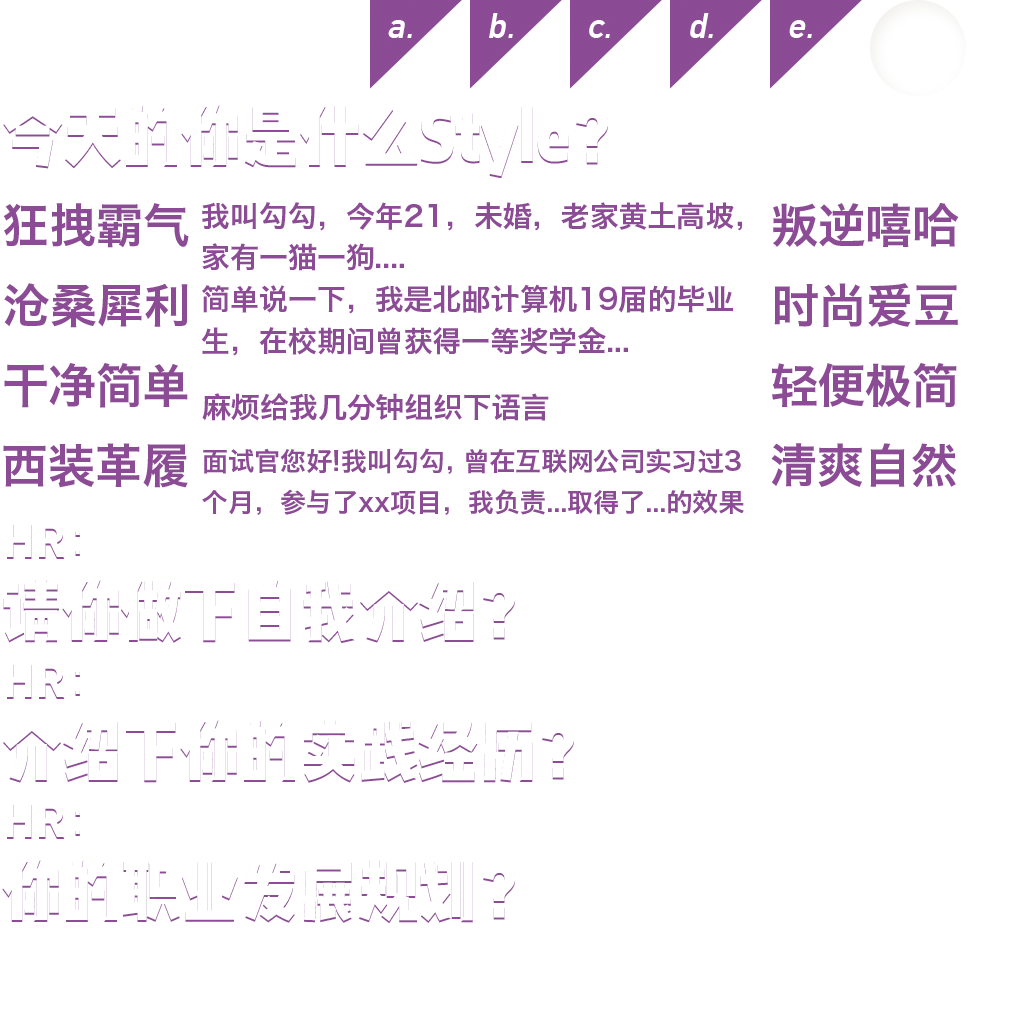
<style>
.page{position:relative;width:1024px;height:1024px;background:#ffffff}
.page>*{position:absolute;margin:0}
.t1{font:35.3px "DINAlternate-Bold";color:#ffffff;font-style:italic}
.t2{font:46.9px "HiraginoSansGB-W6";color:#8c4b95}
.t3{font:28.9px/41.6px "HiraginoSansGB-W6";color:#8c4b95}
.t4{font:28.9px "HiraginoSansGB-W6";color:#8c4b95}
.t5{font:26px/41.6px "HiraginoSansGB-W6";color:#8c4b95}
</style>
<div class="page">
<p class="t1" style="left:489px;top:13px;width:24px;height:25px">b.</p>
<p class="t1" style="left:690px;top:13px;width:23px;height:25px">d.</p>
<p class="t1" style="left:388px;top:20px;width:24px;height:18px">a.</p>
<p class="t1" style="left:589px;top:20px;width:21px;height:18px">c.</p>
<p class="t1" style="left:789px;top:20px;width:23px;height:18px">e.</p>
<p class="t2" style="left:3px;top:203px;width:186px;height:45px">狂拽霸气</p>
<p class="t3" style="left:202px;top:202px;width:540px;height:69px;text-align:justify">我叫勾勾，今年21，未婚，老家黄土高坡，<br>家有一猫一狗....</p>
<p class="t2" style="left:773px;top:203px;width:186px;height:44px">叛逆嘻哈</p>
<p class="t2" style="left:4px;top:283px;width:184px;height:45px">沧桑犀利</p>
<p class="t3" style="left:201px;top:284px;width:532px;height:72px;text-align:justify">简单说一下，我是北邮计算机19届的毕业<br>生，在校期间曾获得一等奖学金...</p>
<p class="t2" style="left:774px;top:283px;width:184px;height:44px">时尚爱豆</p>
<p class="t2" style="left:4px;top:363px;width:184px;height:45px">干净简单</p>
<p class="t2" style="left:772px;top:363px;width:185px;height:45px">轻便极简</p>
<p class="t4" style="left:202px;top:393px;width:347px;height:28px">麻烦给我几分钟组织下语言</p>
<p class="t2" style="left:3px;top:443px;width:185px;height:45px">西装革履</p>
<p class="t5" style="left:202px;top:448px;width:542px;height:67px;text-align:justify">面试官您好!我叫勾勾，曾在互联网公司实习过3<br>个月，参与了xx项目，我负责...取得了...的效果</p>
<p class="t2" style="left:771px;top:443px;width:186px;height:45px">清爽自然</p>
</div>
